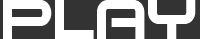
<style>
.page{position:relative;width:200px;height:39px;background:#333333}
.page>*{position:absolute;margin:0}
.t1{font:75px "Bitsumishi";color:#ffffff}
</style>
<div class="page">
<p class="t1" style="left:3px;top:0px;width:193px;height:39px">Play</p>
</div>
